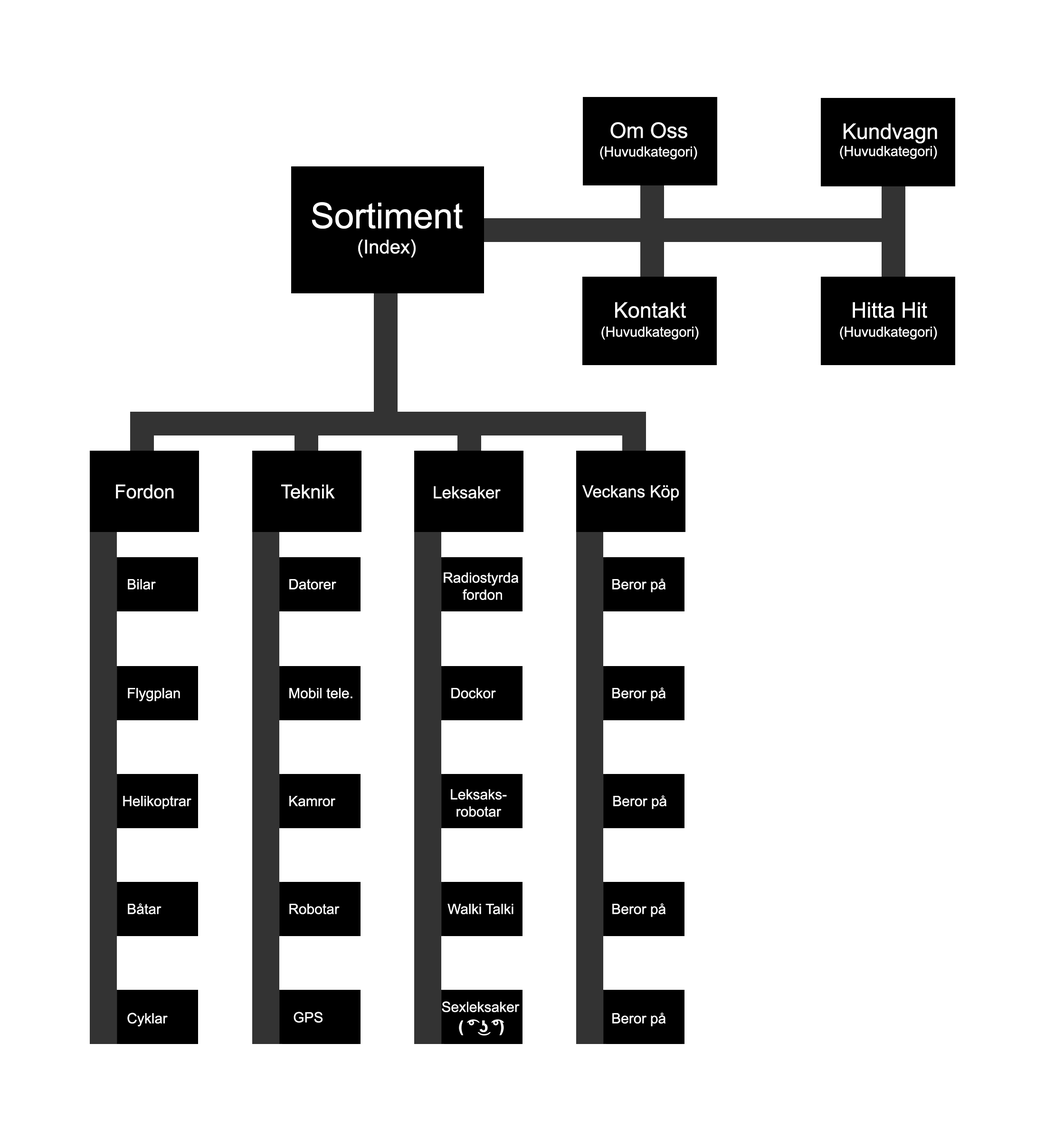
<style>
.page{position:relative;width:1045px;height:1141px;background:#ffffff}
.page>*{position:absolute;margin:0}
.t1{font:21.4px "ArialMT";color:#ffffff}
.t2{font:13.8px "ArialMT";color:#ffffff}
.t3{font:35.6px "ArialMT";color:#ffffff}
.t4{font:19px "ArialMT";color:#ffffff}
.t5{font:16.6px "ArialMT";color:#ffffff}
.t6{font:14.3px "ArialMT";color:#ffffff}
</style>
<div class="page">
<p class="t1" style="left:611px;top:122px;width:77px;height:16px">Om Oss</p>
<p class="t1" style="left:844px;top:123px;width:94px;height:21px">Kundvagn</p>
<p class="t2" style="left:600px;top:146px;width:98px;height:14px">(Huvudkategori)</p>
<p class="t2" style="left:840px;top:145px;width:98px;height:14px">(Huvudkategori)</p>
<p class="t3" style="left:312px;top:202px;width:151px;height:27px">Sortiment</p>
<p class="t4" style="left:358px;top:239px;width:58px;height:19px">(Index)</p>
<p class="t1" style="left:615px;top:302px;width:72px;height:16px">Kontakt</p>
<p class="t1" style="left:853px;top:302px;width:75px;height:16px">Hitta Hit</p>
<p class="t2" style="left:602px;top:326px;width:97px;height:14px">(Huvudkategori)</p>
<p class="t2" style="left:840px;top:326px;width:98px;height:14px">(Huvudkategori)</p>
<p class="t4" style="left:116px;top:484px;width:58px;height:15px">Fordon</p>
<p class="t4" style="left:281px;top:484px;width:54px;height:15px">Teknik</p>
<p class="t5" style="left:434px;top:486px;width:67px;height:13px">Leksaker</p>
<p class="t5" style="left:583px;top:485px;width:96px;height:15px">Veckans Köp</p>
<p class="t6" style="left:128px;top:579px;width:28px;height:10px">Bilar</p>
<p class="t6" style="left:289px;top:579px;width:47px;height:10px">Datorer</p>
<p class="t6" style="left:444px;top:572px;width:74px;height:28px;text-align:center">Radiostyrda<br> fordon</p>
<p class="t6" style="left:613px;top:578px;width:53px;height:14px">Beror på</p>
<p class="t6" style="left:128px;top:688px;width:52px;height:13px">Flygplan</p>
<p class="t6" style="left:289px;top:688px;width:64px;height:10px">Mobil tele.</p>
<p class="t6" style="left:451px;top:688px;width:45px;height:10px">Dockor</p>
<p class="t6" style="left:613px;top:687px;width:53px;height:14px">Beror på</p>
<p class="t6" style="left:123px;top:796px;width:69px;height:13px">Helikoptrar</p>
<p class="t6" style="left:289px;top:796px;width:47px;height:10px">Kamror</p>
<p class="t6" style="left:451px;top:789px;width:56px;height:27px;text-align:center">Leksaks-<br>robotar</p>
<p class="t6" style="left:614px;top:795px;width:53px;height:14px">Beror på</p>
<p class="t6" style="left:128px;top:903px;width:34px;height:11px">Båtar</p>
<p class="t6" style="left:289px;top:903px;width:51px;height:11px">Robotar</p>
<p class="t6" style="left:448px;top:903px;width:66px;height:11px">Walki Talki</p>
<p class="t6" style="left:613px;top:903px;width:53px;height:14px">Beror på</p>
<p class="t6" style="left:442px;top:1001px;width:78px;height:11px">Sexleksaker</p>
<p class="t6" style="left:127px;top:1012px;width:41px;height:14px">Cyklar</p>
<p class="t6" style="left:294px;top:1011px;width:29px;height:11px">GPS</p>
<p class="t6" style="left:613px;top:1012px;width:53px;height:14px">Beror på</p>
</div>
